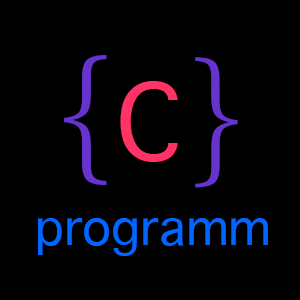
<style>
.page{position:relative;width:300px;height:300px;background:#000000}
.page>*{position:absolute;margin:0}
.t1{font:48px "Sathu";color:#0066ff}
.t2{font:100px "Sathu";color:#ff3366}
</style>
<div class="page">
<p class="t1" style="left:38px;top:81px;width:230px;height:175px;text-align:center"><span class="t2">C<br><br>    </span>programm</p>
</div>
